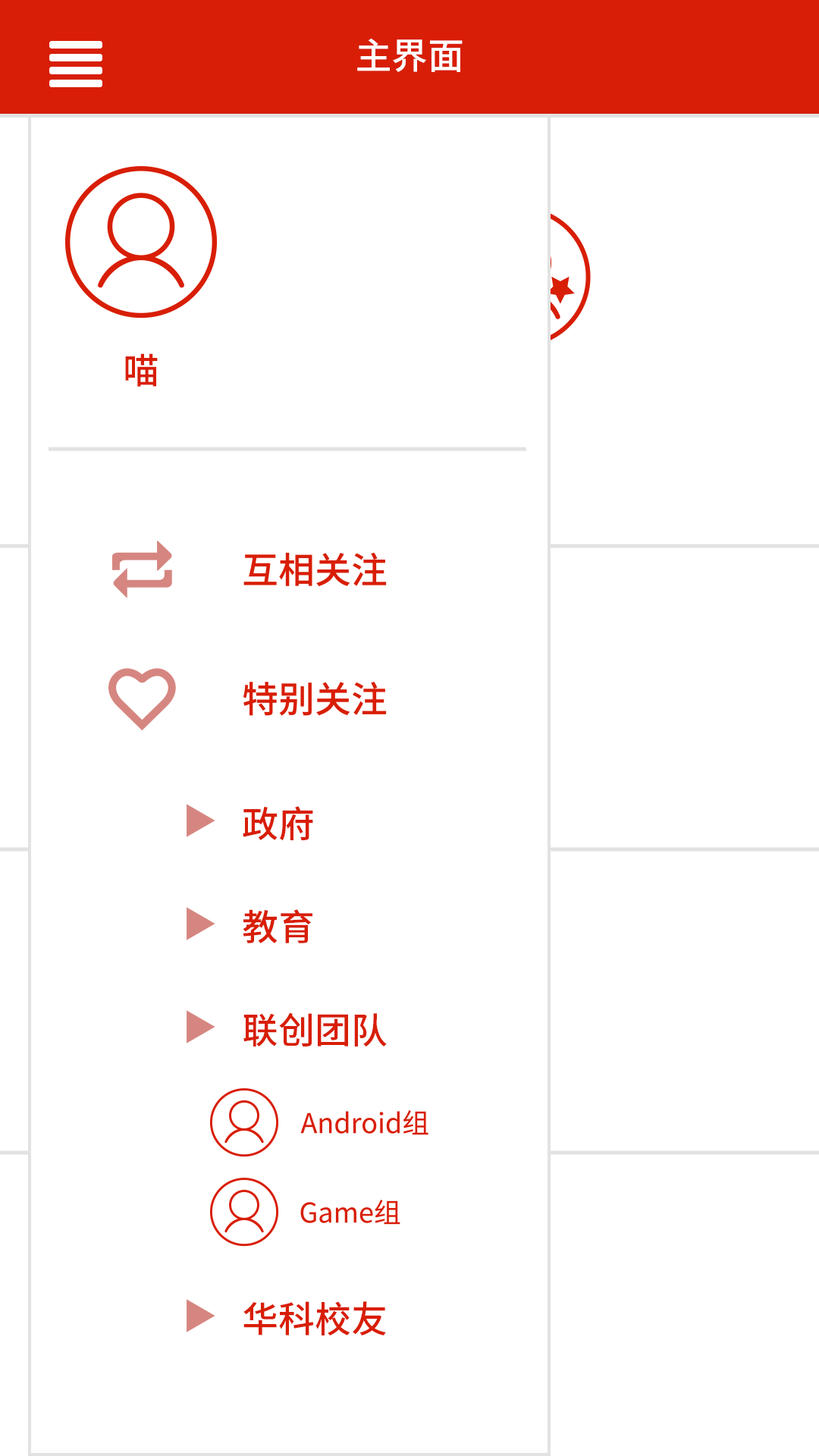
<style>
.page{position:relative;width:819px;height:1456px;background:#ffffff}
.page>*{position:absolute;margin:0}
.t1{font:36.4px "SourceHanSansCN-Medium";color:#ffffff}
.t2{font:36.4px "SourceHanSansCN-Medium";color:#d81e06}
</style>
<div class="page">
<p class="t1" style="left:357px;top:38px;width:106px;height:34px">主界面</p>
<p class="t2" style="left:125px;top:353px;width:33px;height:34px">喵</p>
<p class="t2" style="left:243px;top:806px;width:70px;height:35px">政府</p>
<p class="t2" style="left:243px;top:909px;width:69px;height:34px">教育</p>
<p class="t2" style="left:243px;top:1012px;width:144px;height:35px">联创团队</p>
<p class="t2" style="left:243px;top:1301px;width:143px;height:35px">华科校友</p>
</div>
